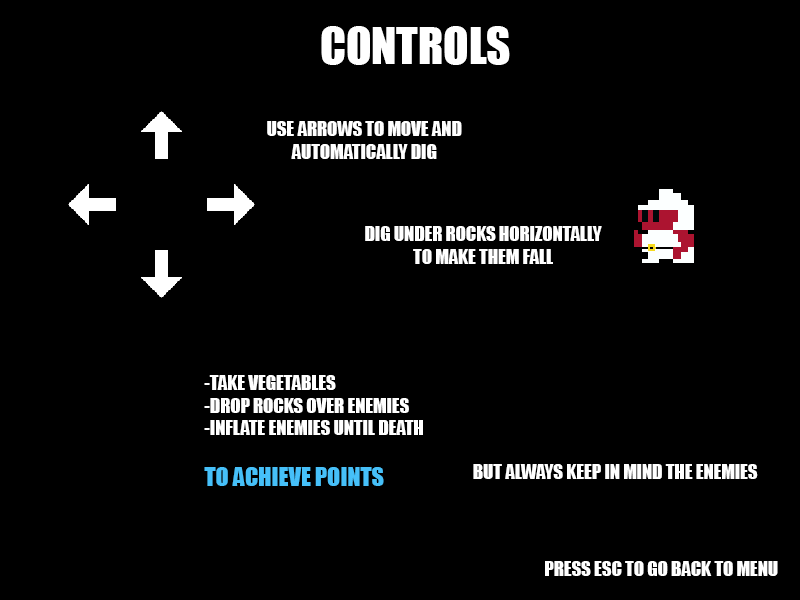
<style>
.page{position:relative;width:800px;height:600px;background:#000000}
.page>*{position:absolute;margin:0}
.t1{font:46.7px "Impact";color:#ffffff}
.t2{font:18.7px "Impact";color:#ffffff}
.t3{font:24px "Impact";color:#46c0f9}
</style>
<div class="page">
<p class="t1" style="left:321px;top:26px;width:189px;height:39px">CONTROLS</p>
<p class="t2" style="left:267px;top:121px;width:195px;height:38px;text-align:center">USE ARROWS TO MOVE AND<br>AUTOMATICALLY DIG</p>
<p class="t2" style="left:365px;top:226px;width:237px;height:38px;text-align:center">DIG UNDER ROCKS HORIZONTALLY<br>TO MAKE THEM FALL</p>
<p class="t2" style="left:204px;top:375px;width:219px;height:111px">-TAKE VEGETABLES<br>-DROP ROCKS OVER ENEMIES<br>-INFLATE ENEMIES UNTIL DEATH<br><br><span class="t3">TO ACHIEVE POINTS</span></p>
<p class="t2" style="left:473px;top:464px;width:285px;height:15px">BUT ALWAYS KEEP IN MIND THE ENEMIES</p>
<p class="t2" style="left:545px;top:561px;width:233px;height:15px">PRESS ESC TO GO BACK TO MENU</p>
</div>
